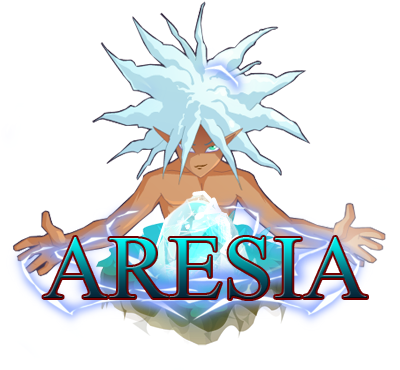
<style>
.page{position:relative;width:400px;height:370px;background:#ffffff}
.page>*{position:absolute;margin:0}
.t1{font:90px "MongolianBaiti"}
</style>
<div class="page">
<p class="t1" style="left:43px;top:237px;width:324px;height:62px">ARESIA</p>
</div>
